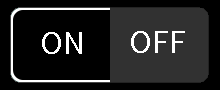
<style>
.page{position:relative;width:220px;height:90px;background:#000000}
.page>*{position:absolute;margin:0}
.t1{font:30px "TaipeiSansTCBeta-Regular";color:#ffffff}
</style>
<div class="page">
<p class="t1" style="left:42px;top:32px;width:40px;height:22px">ON</p>
<p class="t1" style="left:131px;top:31px;width:54px;height:22px">OFF</p>
</div>
